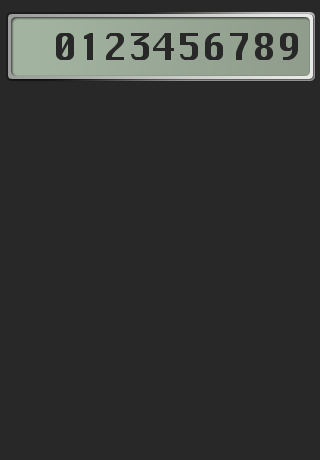
<style>
.page{position:relative;width:320px;height:460px;background:#282828}
.page>*{position:absolute;margin:0}
.t1{font:36px "Krungthep";letter-spacing:0.025em;color:#282828}
</style>
<div class="page">
<p class="t1" style="left:56px;top:33px;width:242px;height:27px">0123456789</p>
</div>
